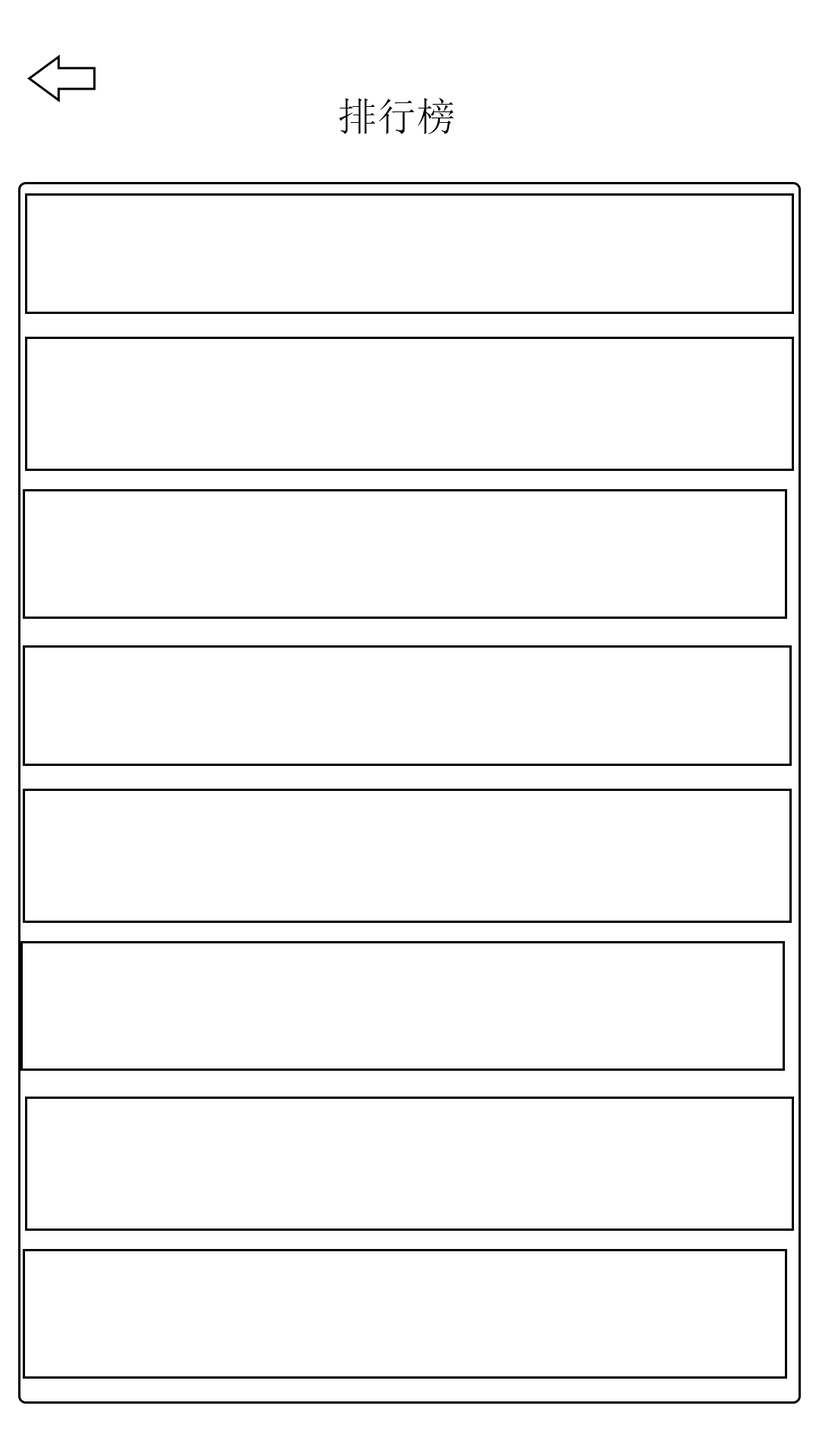
<style>
.page{position:relative;width:819px;height:1456px;background:#ffffff}
.page>*{position:absolute;margin:0}
.t1{font:39.4px "SimSun";color:#000000}
</style>
<div class="page">
<p class="t1" style="left:339px;top:98px;width:115px;height:36px">排行榜</p>
</div>
